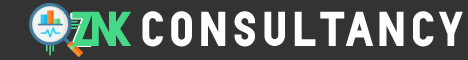
<style>
.page{position:relative;width:468px;height:60px;background:#333333}
.page>*{position:absolute;margin:0}
.t1{font:49px "Boisu-Full";color:#45d987}
.t2{font:49px "Boisu-Full";color:#ffffff}
</style>
<div class="page">
<p class="t1" style="left:72px;top:11px;width:22px;height:35px">Z</p>
<p class="t1" style="left:91px;top:11px;width:25px;height:35px">N</p>
<p class="t1" style="left:108px;top:11px;width:24px;height:35px">K</p>
<p class="t2" style="left:142px;top:11px;width:321px;height:36px">CONSULTANCY</p>
</div>
